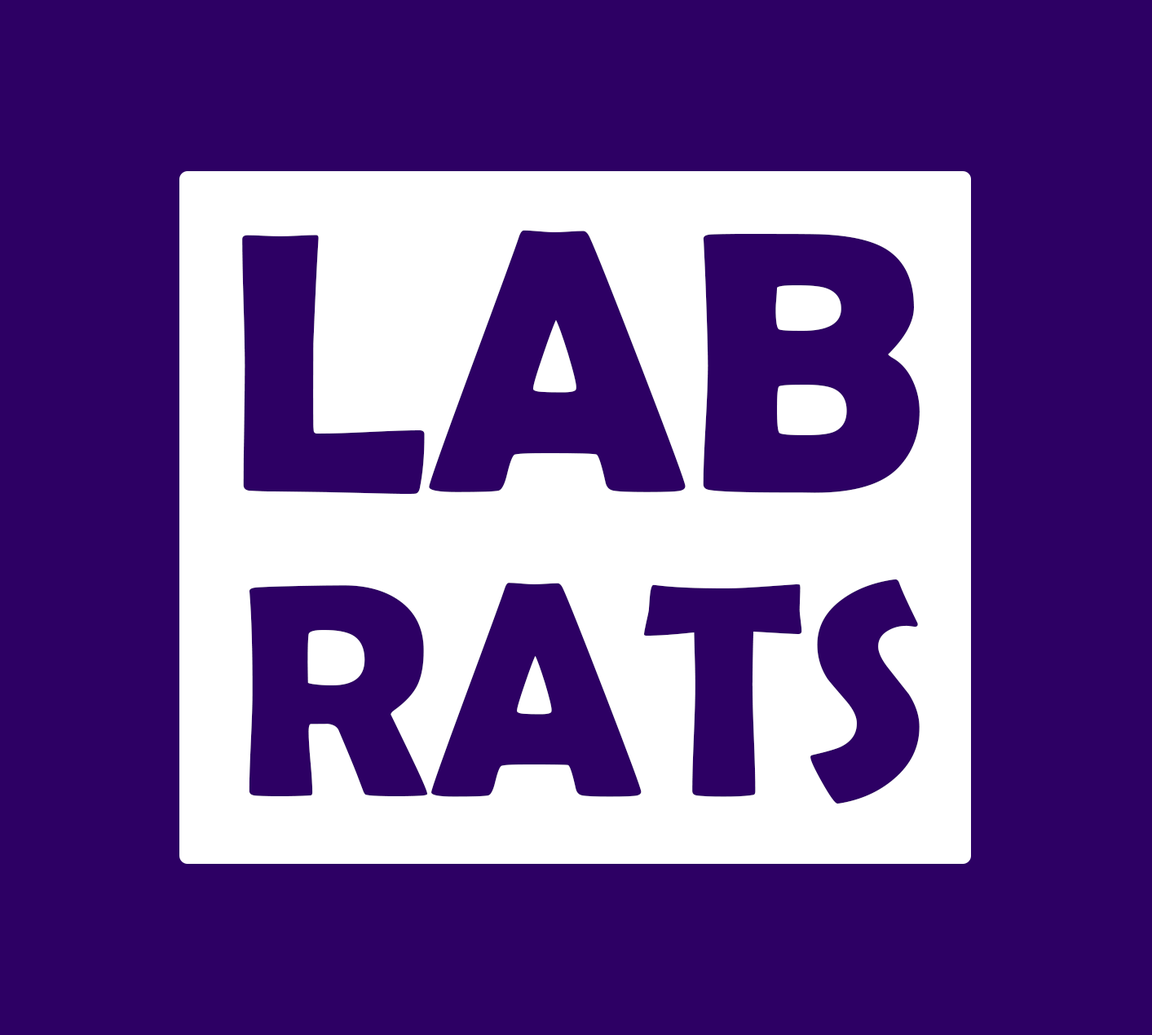
<style>
.page{position:relative;width:1152px;height:1035px;background:#2d0064}
.page>*{position:absolute;margin:0}
.t1{font:373.6px "BerlinSansFBDemi-Bold";color:#2d0064}
.t2{font:305.7px "BerlinSansFBDemi-Bold";color:#2d0064}
</style>
<div class="page">
<p class="t1" style="left:242px;top:230px;width:678px;height:264px">LAB</p>
<p class="t2" style="left:249px;top:580px;width:671px;height:224px">RATS</p>
</div>
